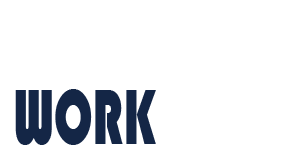
<style>
.page{position:relative;width:300px;height:150px;background:#ffffff}
.page>*{position:absolute;margin:0}
.t1{font:80.7px "Bauhaus93";color:#142646;scale:0.63 1}
</style>
<div class="page">
<p class="t1" style="left:15px;top:89px;width:141px;height:56px">WORK</p>
</div>
